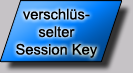
<style>
.page{position:relative;width:133px;height:73px}
.page>*{position:absolute;margin:0}
.t1{font:14.7px "ArialMT";color:#000000}
</style>
<div class="page">
<p class="t1" style="left:16px;top:8px;width:81px;height:50px;text-align:center">verschlüs-<br>selter<br>Session Key</p>
</div>
